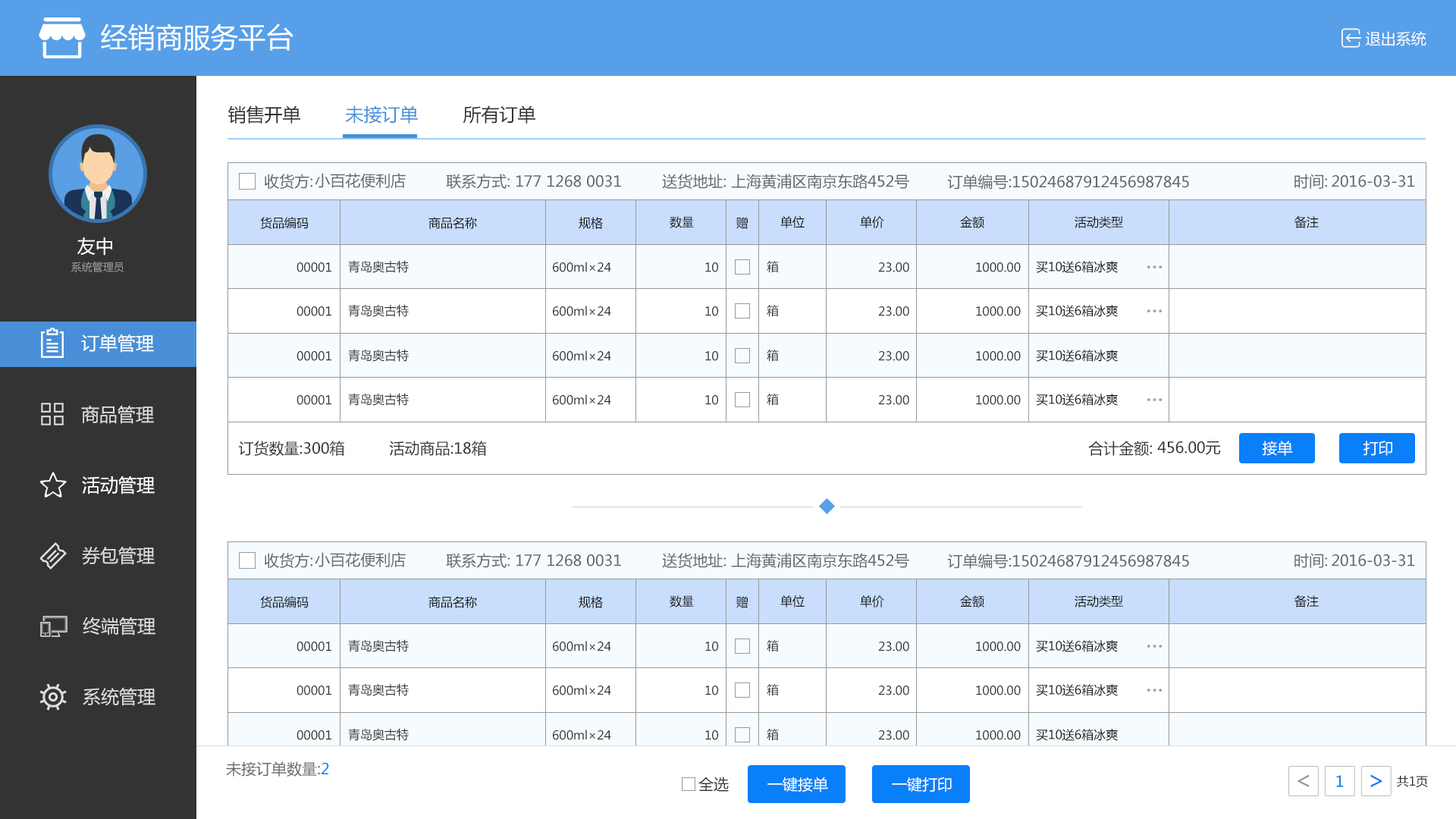
<style>
.page{position:relative;width:1456px;height:819px;background:#ffffff}
.page>*{position:absolute;margin:0}
.t1{font:27.6px "MicrosoftYaHei";color:#ffffff}
.t2{font:15.2px "MicrosoftYaHei";color:#ffffff}
.t3{font:18.2px "MicrosoftYaHei";color:#333333}
.t4{font:18.2px "MicrosoftYaHei";color:#488fd7}
.t5{font:15.2px "MicrosoftYaHei";color:#666666}
.t6{font:12.1px "MicrosoftYaHei";color:#111111}
.t7{font:18.2px "MicrosoftYaHei";color:#ffffff}
.t8{font:10.6px "MicrosoftYaHei";color:#999999}
.t9{font:12.1px "MicrosoftYaHei";color:#333333}
.t10{font:18.2px "MicrosoftYaHei";color:#dddddd}
.t11{font:15.2px "MicrosoftYaHei";color:#333333}
.t12{font:15.2px "MicrosoftYaHei";color:#097ff9}
.t13{font:24.8px "MicrosoftYaHei";color:#999999}
.t14{font:24.8px "MicrosoftYaHei";color:#097ff9}
</style>
<div class="page">
<p class="t1" style="left:101px;top:24px;width:192px;height:28px">经销商服务平台</p>
<p class="t2" style="left:1366px;top:31px;width:60px;height:15px">退出系统</p>
<p class="t3" style="left:228px;top:105px;width:72px;height:19px">销售开单</p>
<p class="t4" style="left:345px;top:105px;width:73px;height:19px">未接订单</p>
<p class="t3" style="left:463px;top:105px;width:72px;height:19px">所有订单</p>
<p class="t5" style="left:265px;top:174px;width:47px;height:15px">收货方:</p>
<p class="t5" style="left:315px;top:173px;width:91px;height:15px">小百花便利店</p>
<p class="t5" style="left:446px;top:174px;width:64px;height:15px">联系方式:</p>
<p class="t5" style="left:662px;top:174px;width:64px;height:15px">送货地址:</p>
<p class="t5" style="left:731px;top:174px;width:178px;height:15px">上海黄浦区南京东路452号</p>
<p class="t5" style="left:1294px;top:174px;width:33px;height:15px">时间:</p>
<p class="t5" style="left:516px;top:175px;width:105px;height:12px">177 1268 0031</p>
<p class="t5" style="left:947px;top:174px;width:242px;height:16px">订单编号:15024687912456987845</p>
<p class="t5" style="left:1332px;top:175px;width:83px;height:12px">2016-03-31</p>
<p class="t6" style="left:260px;top:217px;width:49px;height:12px">货品编码</p>
<p class="t6" style="left:428px;top:217px;width:49px;height:12px">商品名称</p>
<p class="t6" style="left:579px;top:217px;width:24px;height:12px">规格</p>
<p class="t6" style="left:670px;top:216px;width:24px;height:12px">数量</p>
<p class="t6" style="left:736px;top:217px;width:12px;height:12px">赠</p>
<p class="t6" style="left:780px;top:216px;width:25px;height:12px">单位</p>
<p class="t6" style="left:860px;top:216px;width:24px;height:12px">单价</p>
<p class="t6" style="left:960px;top:216px;width:24px;height:12px">金额</p>
<p class="t6" style="left:1075px;top:216px;width:48px;height:12px">活动类型</p>
<p class="t6" style="left:1294px;top:215px;width:25px;height:13px">备注</p>
<p class="t7" style="left:77px;top:237px;width:35px;height:19px">友中</p>
<p class="t8" style="left:71px;top:262px;width:53px;height:10px">系统管理员</p>
<p class="t9" style="left:297px;top:262px;width:34px;height:10px">00001</p>
<p class="t9" style="left:348px;top:260px;width:61px;height:13px">青岛奥古特</p>
<p class="t9" style="left:553px;top:262px;width:58px;height:10px">600ml×24</p>
<p class="t9" style="left:705px;top:262px;width:13px;height:10px">10</p>
<p class="t9" style="left:767px;top:261px;width:12px;height:12px">箱</p>
<p class="t9" style="left:878px;top:262px;width:31px;height:10px">23.00</p>
<p class="t9" style="left:976px;top:262px;width:45px;height:10px">1000.00</p>
<p class="t6" style="left:1036px;top:261px;width:82px;height:12px">买10送6箱冰爽</p>
<p class="t9" style="left:348px;top:304px;width:61px;height:13px">青岛奥古特</p>
<p class="t9" style="left:553px;top:306px;width:58px;height:10px">600ml×24</p>
<p class="t9" style="left:767px;top:305px;width:12px;height:12px">箱</p>
<p class="t6" style="left:1036px;top:305px;width:82px;height:12px">买10送6箱冰爽</p>
<p class="t9" style="left:297px;top:306px;width:34px;height:10px">00001</p>
<p class="t9" style="left:705px;top:306px;width:13px;height:10px">10</p>
<p class="t9" style="left:878px;top:306px;width:31px;height:10px">23.00</p>
<p class="t9" style="left:976px;top:306px;width:45px;height:10px">1000.00</p>
<p class="t7" style="left:81px;top:334px;width:73px;height:19px">订单管理</p>
<p class="t9" style="left:297px;top:351px;width:34px;height:10px">00001</p>
<p class="t9" style="left:348px;top:349px;width:61px;height:13px">青岛奥古特</p>
<p class="t9" style="left:553px;top:350px;width:58px;height:11px">600ml×24</p>
<p class="t9" style="left:705px;top:351px;width:13px;height:10px">10</p>
<p class="t9" style="left:767px;top:350px;width:12px;height:12px">箱</p>
<p class="t9" style="left:878px;top:351px;width:31px;height:10px">23.00</p>
<p class="t9" style="left:976px;top:351px;width:45px;height:10px">1000.00</p>
<p class="t6" style="left:1036px;top:350px;width:82px;height:12px">买10送6箱冰爽</p>
<p class="t9" style="left:297px;top:395px;width:34px;height:10px">00001</p>
<p class="t9" style="left:348px;top:393px;width:61px;height:13px">青岛奥古特</p>
<p class="t9" style="left:553px;top:394px;width:58px;height:11px">600ml×24</p>
<p class="t9" style="left:705px;top:395px;width:13px;height:10px">10</p>
<p class="t9" style="left:767px;top:394px;width:12px;height:12px">箱</p>
<p class="t9" style="left:878px;top:395px;width:31px;height:10px">23.00</p>
<p class="t9" style="left:976px;top:395px;width:45px;height:10px">1000.00</p>
<p class="t6" style="left:1036px;top:394px;width:82px;height:12px">买10送6箱冰爽</p>
<p class="t10" style="left:81px;top:405px;width:73px;height:19px">商品管理</p>
<p class="t11" style="left:238px;top:441px;width:106px;height:16px">订货数量:300箱</p>
<p class="t11" style="left:389px;top:441px;width:98px;height:15px">活动商品:18箱</p>
<p class="t11" style="left:1088px;top:441px;width:64px;height:16px">合计金额:</p>
<p class="t11" style="left:1157px;top:441px;width:64px;height:14px">456.00元</p>
<p class="t2" style="left:1262px;top:441px;width:31px;height:15px">接单</p>
<p class="t2" style="left:1363px;top:441px;width:29px;height:15px">打印</p>
<p class="t7" style="left:82px;top:476px;width:73px;height:18px">活动管理</p>
<p class="t10" style="left:82px;top:547px;width:73px;height:18px">券包管理</p>
<p class="t5" style="left:265px;top:553px;width:47px;height:15px">收货方:</p>
<p class="t5" style="left:315px;top:552px;width:91px;height:15px">小百花便利店</p>
<p class="t5" style="left:446px;top:553px;width:64px;height:15px">联系方式:</p>
<p class="t5" style="left:516px;top:554px;width:105px;height:12px">177 1268 0031</p>
<p class="t5" style="left:662px;top:553px;width:64px;height:15px">送货地址:</p>
<p class="t5" style="left:731px;top:553px;width:178px;height:15px">上海黄浦区南京东路452号</p>
<p class="t5" style="left:947px;top:554px;width:242px;height:15px">订单编号:15024687912456987845</p>
<p class="t5" style="left:1294px;top:553px;width:33px;height:15px">时间:</p>
<p class="t5" style="left:1332px;top:554px;width:83px;height:12px">2016-03-31</p>
<p class="t6" style="left:260px;top:596px;width:49px;height:12px">货品编码</p>
<p class="t6" style="left:428px;top:596px;width:49px;height:12px">商品名称</p>
<p class="t6" style="left:579px;top:596px;width:24px;height:12px">规格</p>
<p class="t6" style="left:670px;top:595px;width:24px;height:12px">数量</p>
<p class="t6" style="left:736px;top:596px;width:12px;height:12px">赠</p>
<p class="t6" style="left:780px;top:595px;width:25px;height:12px">单位</p>
<p class="t6" style="left:860px;top:595px;width:24px;height:12px">单价</p>
<p class="t6" style="left:960px;top:595px;width:24px;height:12px">金额</p>
<p class="t6" style="left:1075px;top:595px;width:48px;height:12px">活动类型</p>
<p class="t6" style="left:1294px;top:595px;width:25px;height:12px">备注</p>
<p class="t10" style="left:83px;top:617px;width:72px;height:18px">终端管理</p>
<p class="t9" style="left:297px;top:642px;width:34px;height:9px">00001</p>
<p class="t9" style="left:348px;top:639px;width:61px;height:13px">青岛奥古特</p>
<p class="t9" style="left:553px;top:641px;width:58px;height:10px">600ml×24</p>
<p class="t9" style="left:705px;top:642px;width:13px;height:9px">10</p>
<p class="t9" style="left:767px;top:640px;width:12px;height:12px">箱</p>
<p class="t9" style="left:878px;top:642px;width:31px;height:9px">23.00</p>
<p class="t9" style="left:976px;top:642px;width:45px;height:9px">1000.00</p>
<p class="t6" style="left:1036px;top:640px;width:82px;height:12px">买10送6箱冰爽</p>
<p class="t10" style="left:83px;top:688px;width:72px;height:18px">系统管理</p>
<p class="t9" style="left:297px;top:686px;width:34px;height:9px">00001</p>
<p class="t9" style="left:348px;top:683px;width:61px;height:13px">青岛奥古特</p>
<p class="t9" style="left:553px;top:685px;width:58px;height:10px">600ml×24</p>
<p class="t9" style="left:705px;top:686px;width:13px;height:9px">10</p>
<p class="t9" style="left:767px;top:684px;width:12px;height:12px">箱</p>
<p class="t9" style="left:878px;top:686px;width:31px;height:9px">23.00</p>
<p class="t9" style="left:976px;top:686px;width:45px;height:9px">1000.00</p>
<p class="t6" style="left:1036px;top:684px;width:82px;height:12px">买10送6箱冰爽</p>
<p class="t9" style="left:297px;top:730px;width:34px;height:10px">00001</p>
<p class="t9" style="left:348px;top:728px;width:61px;height:13px">青岛奥古特</p>
<p class="t9" style="left:553px;top:730px;width:58px;height:10px">600ml×24</p>
<p class="t9" style="left:705px;top:730px;width:13px;height:10px">10</p>
<p class="t9" style="left:767px;top:729px;width:12px;height:12px">箱</p>
<p class="t9" style="left:878px;top:730px;width:31px;height:10px">23.00</p>
<p class="t9" style="left:976px;top:730px;width:45px;height:10px">1000.00</p>
<p class="t6" style="left:1036px;top:729px;width:82px;height:12px">买10送6箱冰爽</p>
<p class="t5" style="left:226px;top:761px;width:103px;height:16px">未接订单数量:<span class="t12">2</span></p>
<p class="t11" style="left:698px;top:777px;width:31px;height:15px">全选</p>
<p class="t2" style="left:767px;top:777px;width:61px;height:15px">一键接单</p>
<p class="t2" style="left:892px;top:777px;width:60px;height:15px">一键打印</p>
<p class="t13" style="left:1297px;top:774px;width:13px;height:14px">&lt;</p>
<p class="t12" style="left:1336px;top:775px;width:8px;height:12px">1</p>
<p class="t14" style="left:1370px;top:774px;width:12px;height:14px;rotate:180deg">&lt;</p>
<p class="t9" style="left:1397px;top:775px;width:31px;height:13px">共1页</p>
</div>
